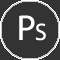
<style>
.page{position:relative;width:60px;height:60px;background:#333333}
.page>*{position:absolute;margin:0}
.t1{font:36px "MyriadPro-Regular";letter-spacing:-0.025em;color:#ffffff}
.t2{font:24px "MyriadPro-Regular";letter-spacing:-0.025em;color:#ffffff}
</style>
<div class="page">
<p class="t1" style="left:19px;top:15px;width:27px;height:26px">P<span class="t2">S</span></p>
</div>
